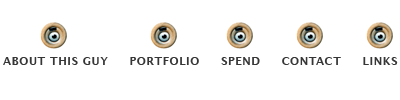
<style>
.page{position:relative;width:400px;height:100px;background:#ffffff}
.page>*{position:absolute;margin:0}
.t1{font:11px "LucidaGrande-Bold";letter-spacing:0.055em;color:#363636}
</style>
<div class="page">
<p class="t1" style="left:3px;top:57px;width:395px;height:8px">ABOUT THIS GUY     PORTFOLIO     SPEND     CONTACT     LINKS</p>
</div>
